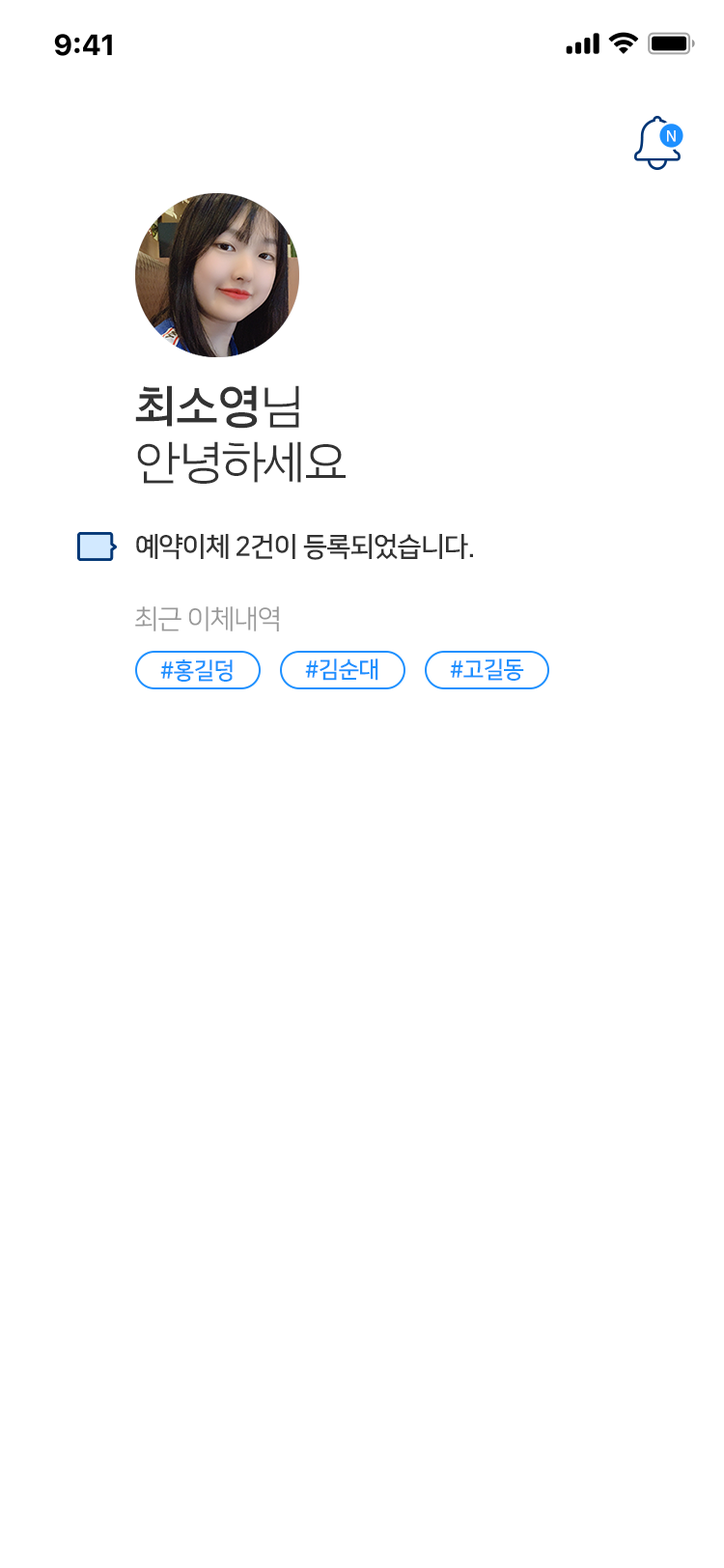
<style>
.page{position:relative;width:724px;height:1568px;background:#ffffff}
.page>*{position:absolute;margin:0}
.t1{font:15.4px "NanumSquareB";letter-spacing:-0.04em;color:#ffffff}
.t2{font:48.3px/56px "Arita-dotum-Medium_TTF";letter-spacing:-0.04em;color:#333333}
.t3{font:48.3px/56px "Arita-dotum-SemiBold_TTF";letter-spacing:-0.04em;color:#333333}
.t4{font:27px "NanumSquareB";letter-spacing:-0.04em;color:#333333}
.t5{font:27px "NanumSquareR";letter-spacing:-0.04em;color:#999999}
.t6{font:23.2px "NanumSquareB";letter-spacing:-0.04em;color:#1e90ff}
</style>
<div class="page">
<p class="t1" style="left:667px;top:130px;width:9px;height:12px">N</p>
<p class="t2" style="left:135px;top:385px;width:211px;height:99px"><span class="t3">최소영</span>님<br>안녕하세요</p>
<p class="t4" style="left:136px;top:534px;width:337px;height:26px">예약이체 2건이 등록되었습니다.</p>
<p class="t5" style="left:135px;top:606px;width:144px;height:25px">최근 이체내역</p>
<p class="t6" style="left:160px;top:659px;width:73px;height:23px">#홍길덩</p>
<p class="t6" style="left:305px;top:658px;width:73px;height:23px">#김순대</p>
<p class="t6" style="left:450px;top:658px;width:74px;height:23px">#고길동</p>
</div>
